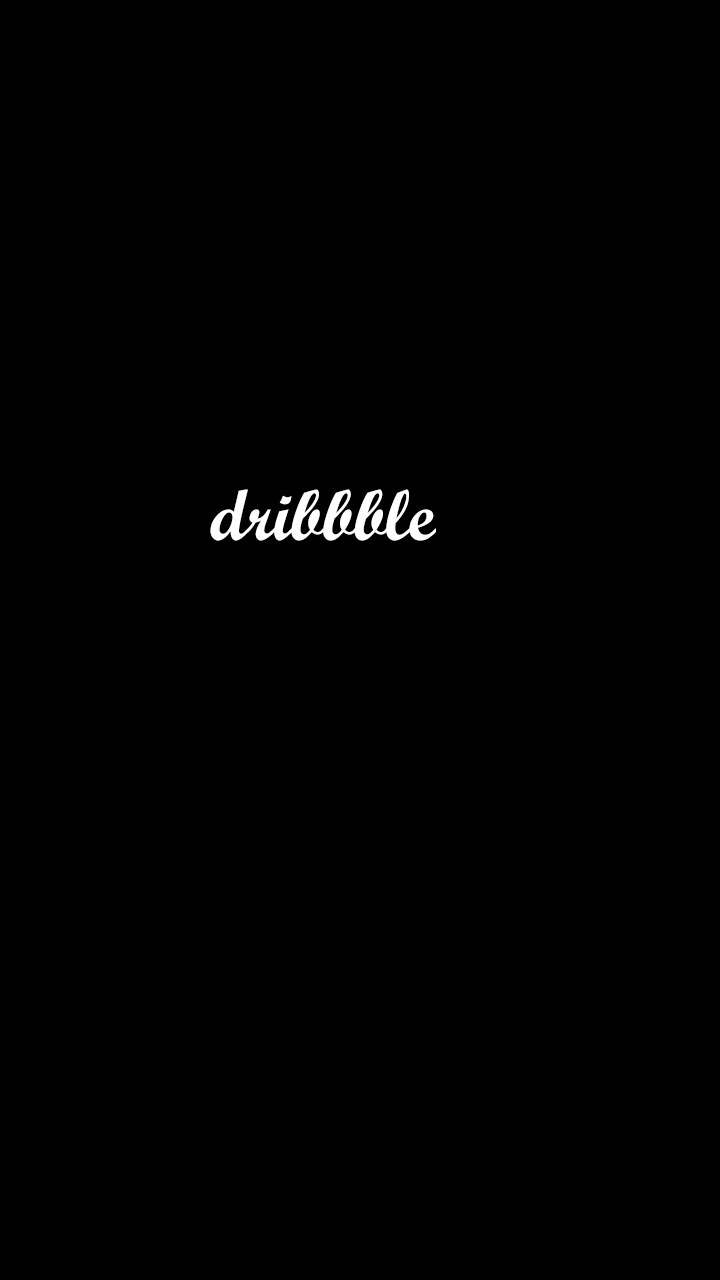
<style>
.page{position:relative;width:720px;height:1280px;background:#000000}
.page>*{position:absolute;margin:0}
.t1{font:72px "ScriptMTBold";color:#ffffff}
</style>
<div class="page">
<p class="t1" style="left:210px;top:489px;width:226px;height:52px">dribbble</p>
</div>
